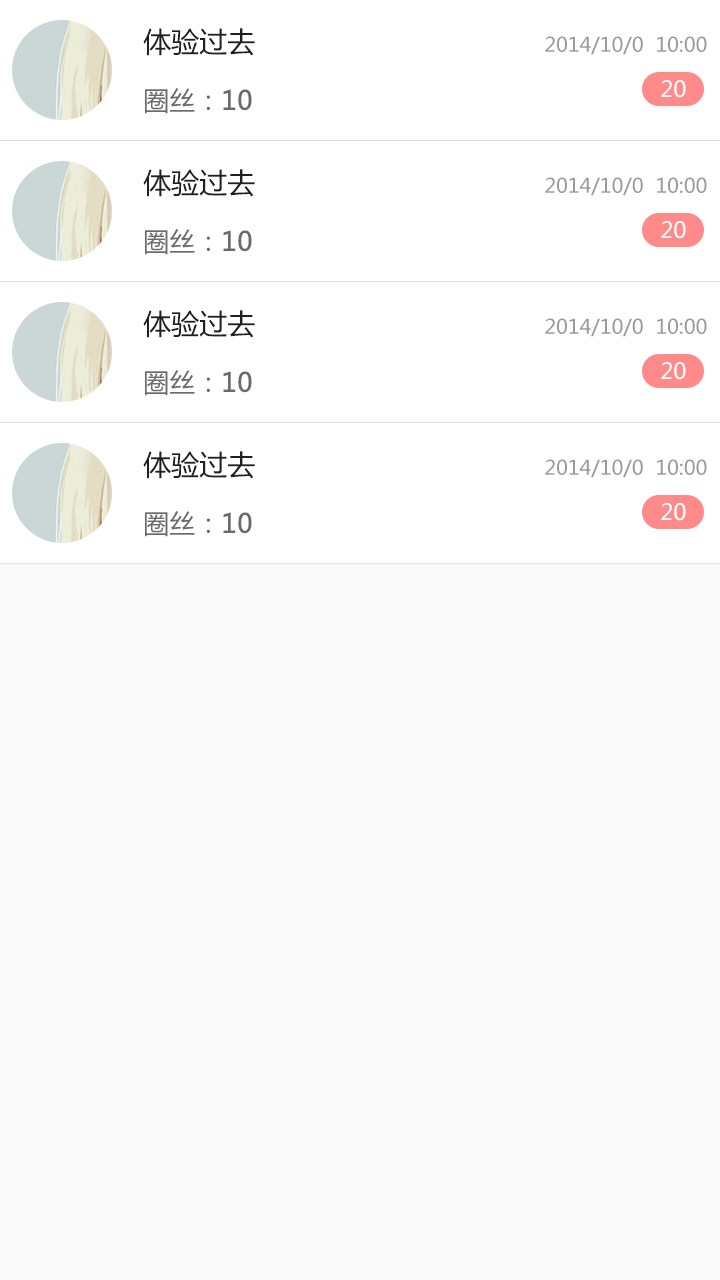
<style>
.page{position:relative;width:720px;height:1280px;background:#f9f9f9}
.page>*{position:absolute;margin:0}
.t1{font:28px "MicrosoftYaHei";color:#1f1f1f}
.t2{font:20px "MicrosoftYaHei";color:#9a9a9a}
.t3{font:26px "MicrosoftYaHei";color:#6b6b6b}
.t4{font:26px "MicrosoftYaHei";color:#6b6b6b;font-weight:bold}
.t5{font:22px "MicrosoftYaHei";color:#ffffff}
</style>
<div class="page">
<p class="t1" style="left:143px;top:28px;width:112px;height:28px">体验过去</p>
<p class="t2" style="left:545px;top:36px;width:162px;height:19px">2014/10/0  10:00</p>
<p class="t3" style="left:145px;top:88px;width:107px;height:26px">圈丝：<span class="t4">10</span></p>
<p class="t5" style="left:661px;top:80px;width:25px;height:18px">20</p>
<p class="t1" style="left:143px;top:169px;width:112px;height:28px">体验过去</p>
<p class="t2" style="left:545px;top:177px;width:162px;height:19px">2014/10/0  10:00</p>
<p class="t5" style="left:661px;top:221px;width:25px;height:18px">20</p>
<p class="t3" style="left:145px;top:229px;width:107px;height:26px">圈丝：<span class="t4">10</span></p>
<p class="t1" style="left:143px;top:310px;width:112px;height:28px">体验过去</p>
<p class="t2" style="left:545px;top:318px;width:162px;height:19px">2014/10/0  10:00</p>
<p class="t5" style="left:661px;top:362px;width:25px;height:18px">20</p>
<p class="t3" style="left:145px;top:370px;width:107px;height:26px">圈丝：<span class="t4">10</span></p>
<p class="t1" style="left:143px;top:451px;width:112px;height:28px">体验过去</p>
<p class="t2" style="left:545px;top:459px;width:162px;height:19px">2014/10/0  10:00</p>
<p class="t5" style="left:661px;top:503px;width:25px;height:18px">20</p>
<p class="t3" style="left:145px;top:511px;width:107px;height:26px">圈丝：<span class="t4">10</span></p>
</div>
